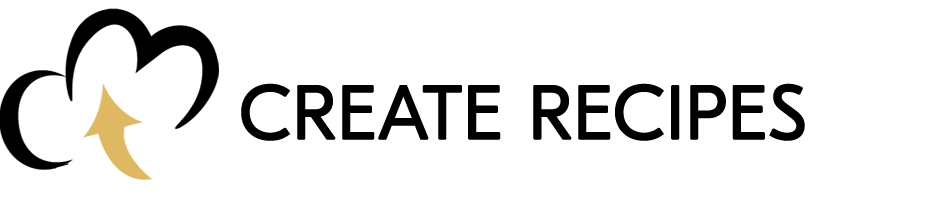
<style>
.page{position:relative;width:938px;height:218px;background:#ffffff}
.page>*{position:absolute;margin:0}
.t1{font:75px "GTEestiDisplayTrial-Lt";color:#000000;font-weight:bold}
</style>
<div class="page">
<p class="t1" style="left:241px;top:83px;width:564px;height:58px">CREATE RECIPES</p>
</div>
